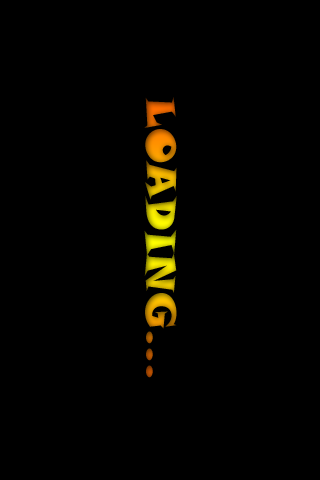
<style>
.page{position:relative;width:320px;height:480px;background:#000000}
.page>*{position:absolute;margin:0}
.t1{font:42px "SnapITC-Regular"}
</style>
<div class="page">
<p class="t1" style="left:144px;top:97px;width:33px;height:281px;rotate:90deg">LOADING...</p>
</div>
